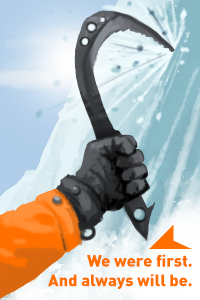
<style>
.page{position:relative;width:200px;height:300px}
.page>*{position:absolute;margin:0}
.t1{font:16.4px "DINPro-Black";color:#ff6f00}
</style>
<div class="page">
<p class="t1" style="left:48px;top:254px;width:144px;height:35px;text-align:right">We were first.<br>And always will be.</p>
</div>
